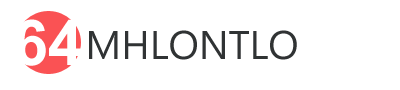
<style>
.page{position:relative;width:400px;height:90px;background:#ffffff}
.page>*{position:absolute;margin:0}
.t1{font:63px "Arial-BoldMT";color:#ffffff}
.t2{font:40px "MicrosoftNewTaiLue";color:#303334}
</style>
<div class="page">
<p class="t1" style="left:15px;top:19px;width:67px;height:47px">64</p>
<p class="t2" style="left:89px;top:30px;width:208px;height:30px">MHLONTLO</p>
</div>
